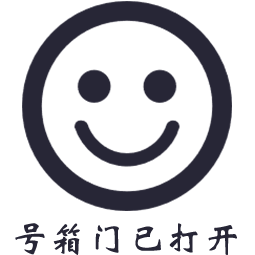
<style>
.page{position:relative;width:255px;height:255px;background:#ffffff}
.page>*{position:absolute;margin:0}
.t1{font:37.5px "STXinwei";letter-spacing:0.02em;color:#272636}
</style>
<div class="page">
<p class="t1" style="left:15px;top:223px;width:222px;height:32px">号箱门已打开</p>
</div>
